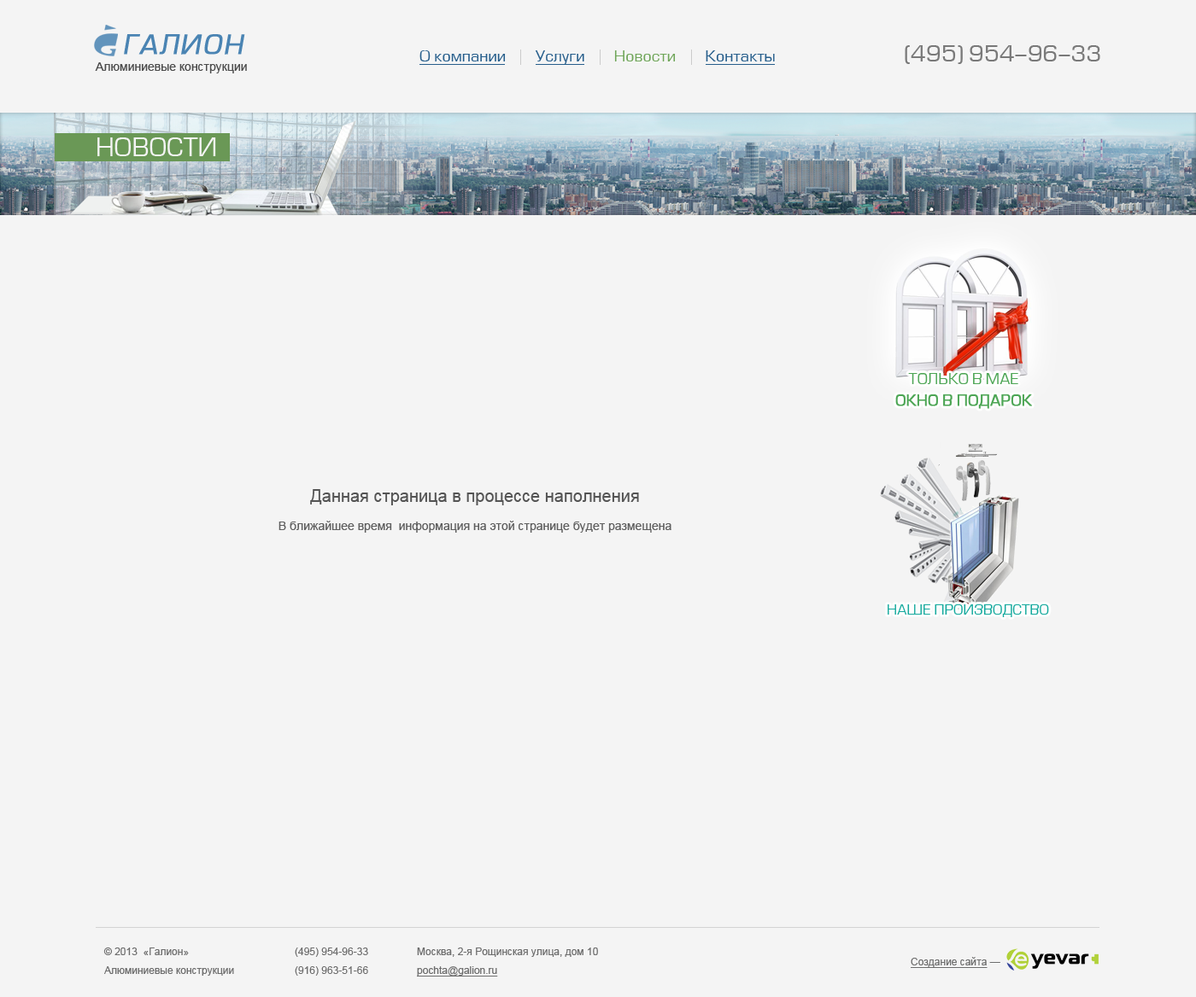
<style>
.page{position:relative;width:1196px;height:997px;background:#f4f4f4}
.page>*{position:absolute;margin:0}
.t1{font:25.6px "Europe-Italic";letter-spacing:0.06em;color:#4a84b3;font-weight:bold}
.t2{font:15.4px "EuropeNormal";color:#275e8b}
.t3{font:15.4px "EuropeNormal";color:#70a559}
.t4{font:22.2px "EuropeNormal";color:#797979}
.t5{font:12px "ArialMT";color:#4b4b4b}
.t6{font:24.8px "EuropeNormal";color:#f4f4f4;text-transform:uppercase}
.t7{font:14.5px/21.3px "EuropeNormal";color:#4ca554;text-transform:uppercase;font-weight:bold}
.t8{font:14.5px/19.6px "EuropeNormal";color:#4ca554;text-transform:uppercase}
.t9{font:17.1px/17.1px "ArialMT";color:#545454}
.t10{font:12px/28.2px "ArialMT";color:#5e5e5e}
.t11{font:12px/14.5px "ArialMT";color:#5e5e5e}
.t12{font:13.7px "EuropeNormal";color:#14a99d;text-transform:uppercase}
.t13{font:10.2px/18.8px "ArialMT";color:#6d6d6d}
.t14{font:10.2px/18.8px "ArialMT";color:#6d6d6d;text-decoration:underline}
.t15{font:10.2px "ArialMT";color:#6d6d6d;text-decoration:underline}
.t16{font:10.2px "ArialMT";color:#6d6d6d}
</style>
<div class="page">
<p class="t1" style="left:124px;top:34px;width:121px;height:21px">ГАЛИОН</p>
<p class="t2" style="left:419px;top:50px;width:356px;height:15px">О компании        Услуги        <span class="t3">Новости</span>        Контакты</p>
<p class="t4" style="left:904px;top:45px;width:196px;height:19px">(495) 954-96-33</p>
<p class="t5" style="left:95px;top:62px;width:152px;height:11px">Алюминиевые конструкции</p>
<p class="t6" style="left:97px;top:137px;width:119px;height:19px">НОВОСТИ</p>
<p class="t7" style="left:895px;top:373px;width:137px;height:36px;text-align:center"><span class="t8">Только в мае<br></span>Окно в подарок</p>
<p class="t9" style="left:278px;top:489px;width:393px;height:44px;text-align:center">Данная страница в процессе наполнения<br><span class="t10">В ближайшее время  информация на </span><span class="t11">этой странице будет размещена</span></p>
<p class="t12" style="left:887px;top:605px;width:162px;height:12px">НАШЕ ПРОИЗВОДСТВО</p>
<p class="t13" style="left:103px;top:948px;width:131px;height:28px">© 2013  «Галион»<br>Алюминиевые конструкции</p>
<p class="t13" style="left:295px;top:948px;width:73px;height:28px">(495) 954-96-33<br>(916) 963-51-66</p>
<p class="t13" style="left:417px;top:948px;width:181px;height:29px">Москва, 2-я Рощинская улица, дом 10<br><span class="t14">pochta@galion.ru</span></p>
<p class="t15" style="left:910px;top:957px;width:90px;height:11px">Создание сайта<span class="t16"> —</span></p>
</div>
